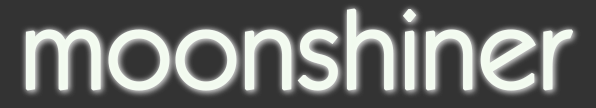
<style>
.page{position:relative;width:596px;height:108px;background:#333333}
.page>*{position:absolute;margin:0}
.t1{font:110px "KabelITCbyBT-Book";color:#f1faee;font-weight:bold}
</style>
<div class="page">
<p class="t1" style="left:25px;top:8px;width:549px;height:83px">moonshiner</p>
</div>
